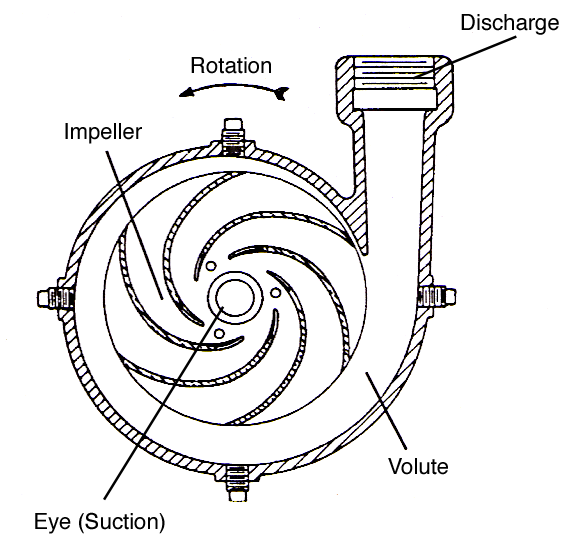
<style>
.page{position:relative;width:568px;height:549px;background:#ffffff}
.page>*{position:absolute;margin:0}
.t1{font:22.1px "Helvetica";color:#000000}
</style>
<div class="page">
<p class="t1" style="left:461px;top:14px;width:98px;height:21px">Discharge</p>
<p class="t1" style="left:191px;top:57px;width:80px;height:17px">Rotation</p>
<p class="t1" style="left:65px;top:123px;width:77px;height:21px">Impeller</p>
<p class="t1" style="left:388px;top:458px;width:60px;height:17px">Volute</p>
<p class="t1" style="left:35px;top:512px;width:130px;height:22px">Eye (Suction)</p>
</div>
